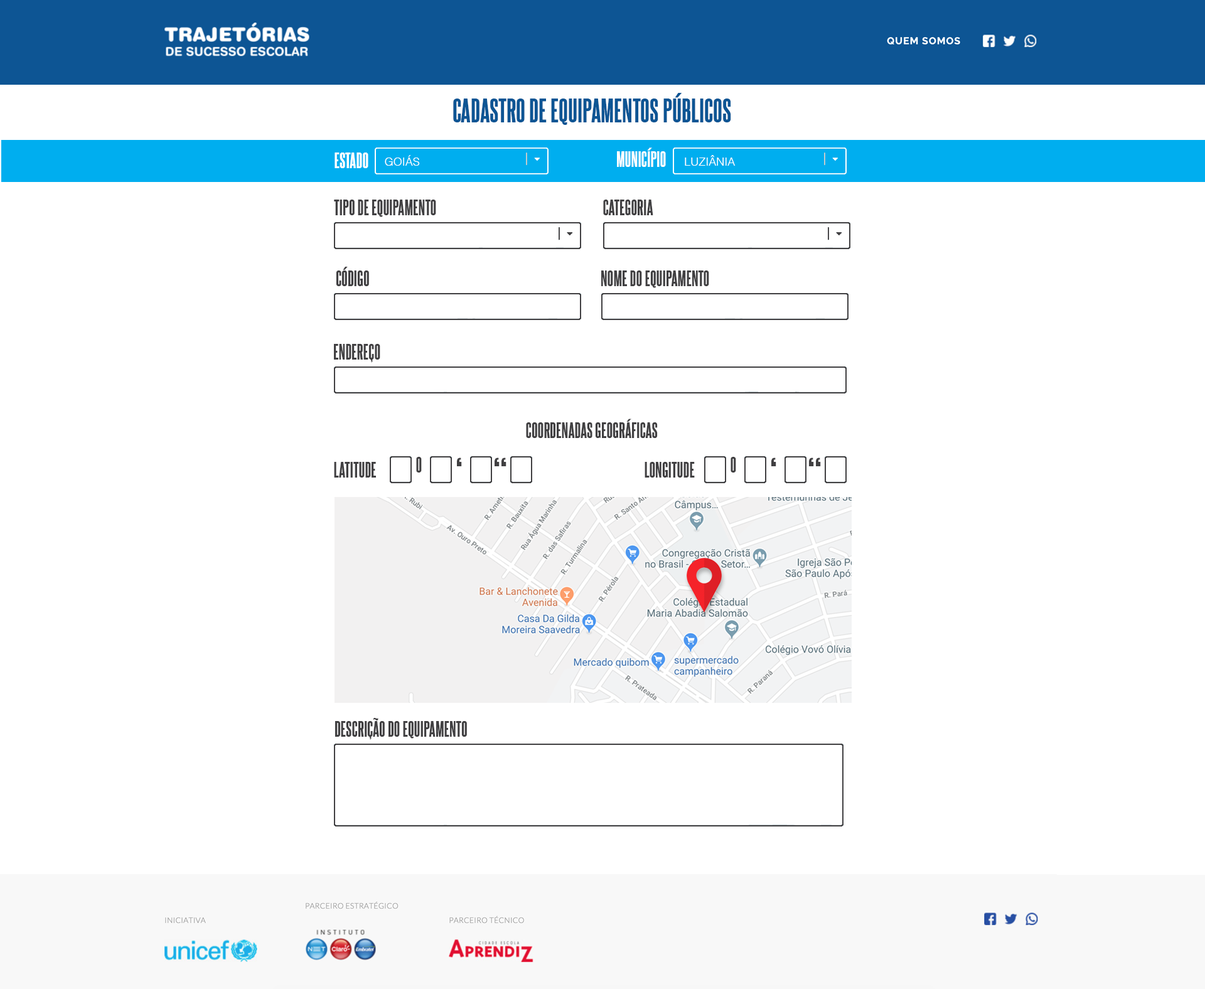
<style>
.page{position:relative;width:1205px;height:989px;background:#ffffff}
.page>*{position:absolute;margin:0}
.t1{font:28.9px "SteelfishEb-Regular";color:#0d5594;text-transform:uppercase}
.t2{font:18.8px "SteelfishEb-Regular";color:#ffffff;text-transform:uppercase}
.t3{font:11.3px "Helvetica-Light";color:#ffffff;text-transform:uppercase}
.t4{font:18.8px "SteelfishEb-Regular";color:#414042;text-transform:uppercase}
.t5{font:45.2px "SteelfishEb-Regular";color:#414042;text-transform:uppercase}
</style>
<div class="page">
<p class="t1" style="left:453px;top:93px;width:278px;height:32px">cadastro de equipamentos públicos</p>
<p class="t2" style="left:617px;top:148px;width:49px;height:19px">município</p>
<p class="t2" style="left:335px;top:153px;width:33px;height:15px">estado</p>
<p class="t3" style="left:385px;top:155px;width:35px;height:11px">Goiás</p>
<p class="t3" style="left:685px;top:155px;width:51px;height:11px">Luziânia</p>
<p class="t4" style="left:334px;top:200px;width:102px;height:17px">tipo de equipamento</p>
<p class="t4" style="left:603px;top:200px;width:50px;height:15px">categoria</p>
<p class="t4" style="left:336px;top:267px;width:33px;height:19px">código</p>
<p class="t4" style="left:601px;top:271px;width:108px;height:17px">nome do equipamento</p>
<p class="t4" style="left:334px;top:344px;width:46px;height:18px">endereço</p>
<p class="t4" style="left:526px;top:419px;width:132px;height:19px">Coordenadas geográficas</p>
<p class="t4" style="left:416px;top:457px;width:6px;height:16px">O</p>
<p class="t5" style="left:457px;top:458px;width:5px;height:8px">‘</p>
<p class="t5" style="left:495px;top:458px;width:12px;height:8px">“</p>
<p class="t4" style="left:731px;top:457px;width:5px;height:16px">O</p>
<p class="t5" style="left:772px;top:458px;width:5px;height:8px">‘</p>
<p class="t5" style="left:809px;top:458px;width:12px;height:8px">“</p>
<p class="t4" style="left:334px;top:462px;width:42px;height:16px">latitude</p>
<p class="t4" style="left:645px;top:462px;width:50px;height:16px">longitude</p>
<p class="t4" style="left:335px;top:718px;width:132px;height:21px">descrição do equipamento</p>
</div>
